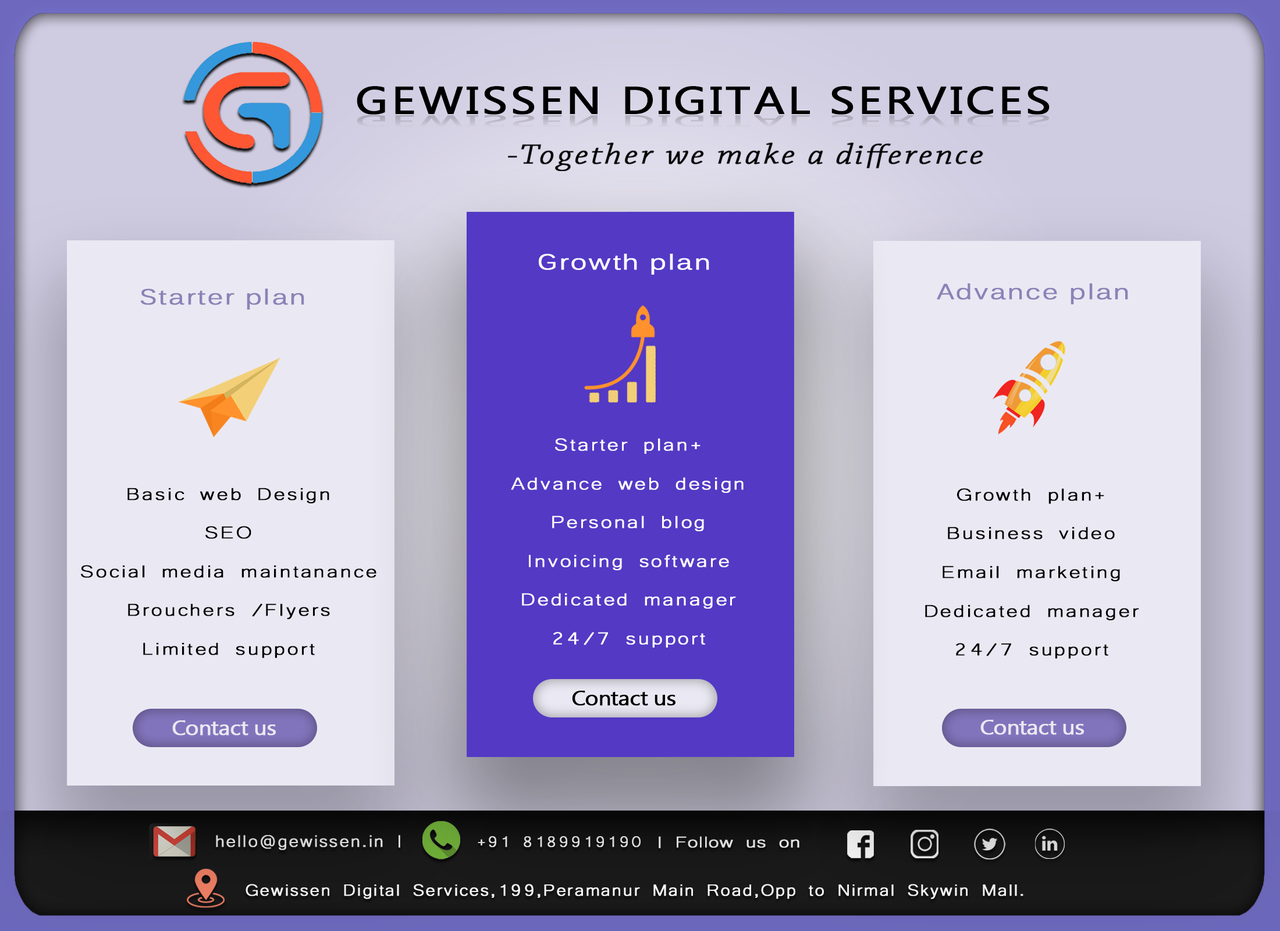
<style>
.page{position:relative;width:1280px;height:931px;background:#eae9f3}
.page>*{position:absolute;margin:0}
.t1{font:38.4px "MicrosoftPhagsPa";letter-spacing:0.05em;color:#000000;font-weight:bold;scale:1.22 1}
.t2{font:16.3px "MicrosoftPhagsPa";letter-spacing:0.05em;color:#bdbac9;font-weight:bold;scale:2.87 1}
.t3{font:29.3px "ChaparralPro-LightIt";letter-spacing:0.05em;color:#000000;font-weight:bold;scale:1.2 1}
.t4{font:21.6px "Kalinga";letter-spacing:0.05em;color:#ffffff;font-weight:bold;scale:1.22 1}
.t5{font:21.6px "Kalinga";letter-spacing:0.05em;color:#8c82b7;font-weight:bold;scale:1.22 1}
.t6{font:22.1px/38.7px "Microsoft-Yi-Baiti";letter-spacing:0.05em;color:#ffffff;font-weight:bold;scale:1.22 1}
.t7{font:22.1px/38.7px "Microsoft-Yi-Baiti";letter-spacing:0.05em;color:#000000;font-weight:bold;scale:1.22 1}
.t8{font:20.1px "MicrosoftNewTaiLue";letter-spacing:-0.03em;color:#000000;font-weight:bold;scale:1.11 1}
.t9{font:20.1px "MicrosoftNewTaiLue";letter-spacing:-0.03em;color:#eae9f3;font-weight:bold;scale:1.11 1}
.t10{font:21.2px "Microsoft-Yi-Baiti";letter-spacing:0.04em;color:#d7d7d7;font-weight:bold;scale:1.09 1}
.t11{font:19.2px "Microsoft-Yi-Baiti";letter-spacing:0.04em;color:#dedede;font-weight:bold;scale:1.09 1}
.t12{font:19.8px "Microsoft-Yi-Baiti";color:#e0e0e0;font-weight:bold;scale:1.27 1}
.t13{font:20.8px "Microsoft-Yi-Baiti";letter-spacing:0.04em;color:#fafafa;font-weight:bold;scale:1.09 1}
</style>
<div class="page">
<p class="t1" style="left:357px;top:86px;width:693px;height:29px">GEWISSEN DIGITAL SERVICES</p>
<p class="t2" style="left:357px;top:115px;width:693px;height:12px">GEWISSEN DIGITAL SERVICES</p>
<p class="t3" style="left:508px;top:143px;width:476px;height:28px">-Together we make a difference</p>
<p class="t4" style="left:539px;top:254px;width:170px;height:21px">Growth plan</p>
<p class="t5" style="left:140px;top:289px;width:164px;height:21px">Starter plan</p>
<p class="t5" style="left:937px;top:283px;width:192px;height:21px">Advance plan</p>
<p class="t6" style="left:511px;top:438px;width:233px;height:210px;text-align:center">Starter plan+<br>Advance web design<br>Personal blog<br>Invoicing software<br>Dedicated manager<br>24/7 support</p>
<p class="t7" style="left:81px;top:488px;width:296px;height:170px;text-align:center">Basic web Design<br>SEO<br>Social media maintanance<br>Brouchers /Flyers<br>Limited support</p>
<p class="t7" style="left:925px;top:488px;width:215px;height:171px;text-align:center">Growth plan+<br>Business video<br>Email marketing<br>Dedicated manager<br>24/7 support</p>
<p class="t8" style="left:572px;top:691px;width:104px;height:15px">Contact us</p>
<p class="t9" style="left:172px;top:721px;width:104px;height:15px">Contact us</p>
<p class="t9" style="left:981px;top:720px;width:103px;height:15px">Contact us</p>
<p class="t10" style="left:216px;top:835px;width:184px;height:15px">hello@gewissen.in |</p>
<p class="t11" style="left:478px;top:836px;width:163px;height:11px">+91 8189919190</p>
<p class="t12" style="left:659px;top:836px;width:141px;height:13px">| Follow us on</p>
<p class="t13" style="left:246px;top:884px;width:778px;height:15px">Gewissen Digital Services,199,Peramanur Main Road,Opp to Nirmal Skywin Mall.</p>
</div>
